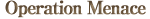
<style>
.page{position:relative;width:150px;height:19px;background:#ffffff}
.page>*{position:absolute;margin:0}
.t1{font:18px "RyuminPro-ExBold";letter-spacing:-0.08em;color:#6c573f;font-weight:bold}
</style>
<div class="page">
<p class="t1" style="left:5px;top:0px;width:141px;height:18px">Operation Menace</p>
</div>
